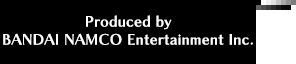
<style>
.page{position:relative;width:296px;height:64px;background:#000000}
.page>*{position:absolute;margin:0}
.t1{font:14px/18px "ChiaroStd-B";letter-spacing:0.025em;color:#ffffff}
</style>
<div class="page">
<p class="t1" style="left:3px;top:15px;width:250px;height:30px;text-align:center">Produced by<br>BANDAI NAMCO Entertainment Inc.</p>
</div>
